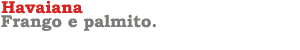
<style>
.page{position:relative;width:300px;height:50px;background:#ffffff}
.page>*{position:absolute;margin:0}
.t1{font:17px "BookmanOldStyle-Bold";color:#d42525}
.t2{font:17px "BookmanOldStyle-Bold";color:#7c7c79}
</style>
<div class="page">
<p class="t1" style="left:1px;top:0px;width:82px;height:14px">Havaiana</p>
<p class="t2" style="left:1px;top:14px;width:155px;height:17px">Frango e palmito.</p>
</div>
